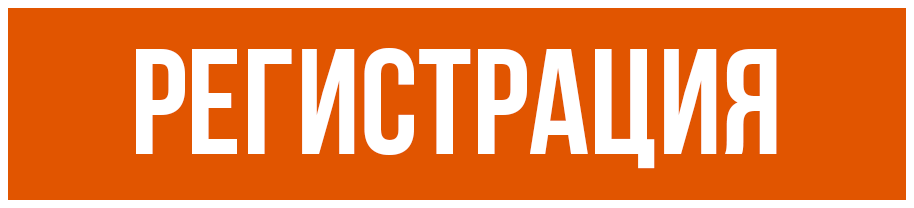
<style>
.page{position:relative;width:914px;height:208px;background:#e15500}
.page>*{position:absolute;margin:0}
.t1{font:150px "BebasNeueBold";color:#ffffff}
</style>
<div class="page">
<p class="t1" style="left:136px;top:48px;width:641px;height:121px">регистрация</p>
</div>
